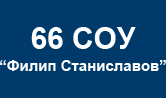
<style>
.page{position:relative;width:166px;height:98px;background:#003a6a}
.page>*{position:absolute;margin:0}
.t1{font:15px/22px "Arial-BoldMT";color:#ffffff}
.t2{font:30px/22px "Arial-BoldMT";color:#ffffff}
</style>
<div class="page">
<p class="t1" style="left:0px;top:27px;width:166px;height:44px;text-align:center"><span class="t2">66 СОУ<br></span>“Филип Станиславов”</p>
</div>
